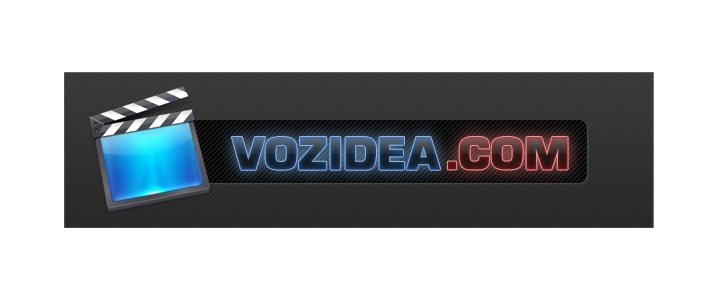
<style>
.page{position:relative;width:718px;height:296px;background:#ffffff}
.page>*{position:absolute;margin:0}
.t1{font:48px "Eurostile-Black-DTC";font-variant:small-caps;font-weight:bold}
</style>
<div class="page">
<p class="t1" style="left:232px;top:137px;width:209px;height:33px">VOZIDEA</p>
<p class="t1" style="left:447px;top:137px;width:121px;height:33px">.COM</p>
</div>
